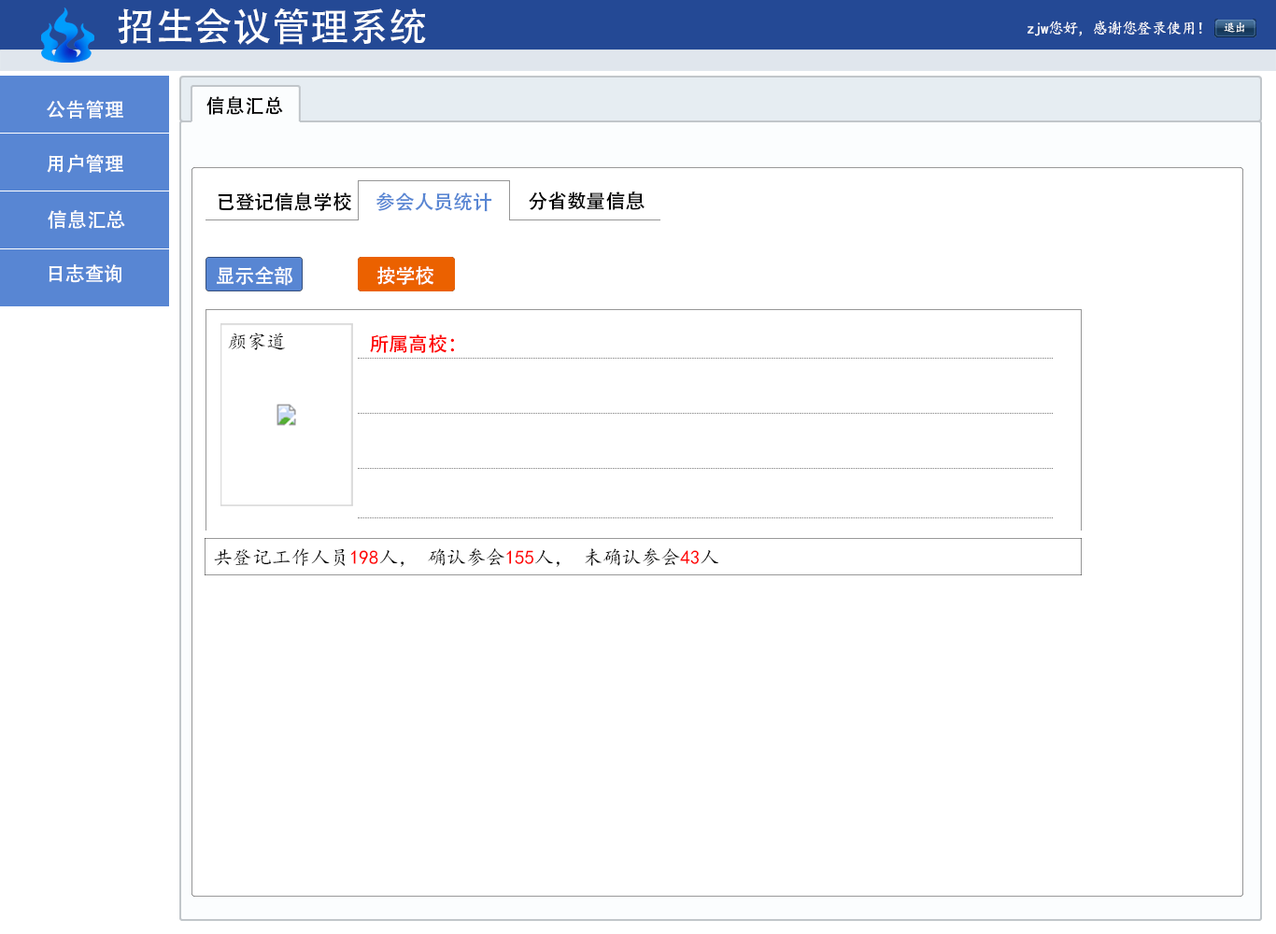
<style>
.page{position:relative;width:1276px;height:934px;background:#ffffff}
.page>*{position:absolute;margin:0}
.t1{font:38.9px "AdobeHeitiStd-Regular";color:#ffffff}
.t2{font:15.6px "KaiTi";letter-spacing:-0.05em;color:#ffffff}
.t3{font:11.7px "KaiTi";letter-spacing:-0.05em;color:#ffffff}
.t4{font:19.5px "AdobeHeitiStd-Regular";color:#fefefe}
.t5{font:19.5px "AdobeHeitiStd-Regular";color:#000000}
.t6{font:19.5px "AdobeHeitiStd-Regular";color:#5886d3}
.t7{font:19.5px "AdobeHeitiStd-Regular";color:#ffffff}
.t8{font:19.5px "KaiTi";color:#000000}
.t9{font:19.5px "AdobeHeitiStd-Regular";color:#fe0000}
.t10{font:19.5px "KaiTi";color:#ff0000}
</style>
<div class="page">
<p class="t1" style="left:118px;top:7px;width:308px;height:38px">招生会议管理系统</p>
<p class="t2" style="left:1028px;top:21px;width:174px;height:15px">zjw您好，感谢您登录使用！</p>
<p class="t3" style="left:1224px;top:22px;width:21px;height:11px">退出</p>
<p class="t4" style="left:47px;top:100px;width:76px;height:19px">公告管理</p>
<p class="t5" style="left:206px;top:96px;width:77px;height:19px">信息汇总</p>
<p class="t4" style="left:47px;top:154px;width:76px;height:19px">用户管理</p>
<p class="t5" style="left:218px;top:192px;width:133px;height:19px">已登记信息学校</p>
<p class="t6" style="left:377px;top:192px;width:115px;height:20px">参会人员统计</p>
<p class="t5" style="left:529px;top:192px;width:116px;height:18px">分省数量信息</p>
<p class="t4" style="left:48px;top:210px;width:77px;height:19px">信息汇总</p>
<p class="t4" style="left:49px;top:264px;width:72px;height:19px">日志查询</p>
<p class="t7" style="left:217px;top:266px;width:75px;height:20px">显示全部</p>
<p class="t7" style="left:377px;top:266px;width:57px;height:19px">按学校</p>
<p class="t8" style="left:228px;top:333px;width:58px;height:17px">颜家道</p>
<p class="t9" style="left:370px;top:334px;width:84px;height:19px">所属高校：</p>
<p class="t8" style="left:214px;top:548px;width:505px;height:19px">共登记工作人员<span class="t10">198</span>人， 确认参会<span class="t10">155</span>人， 未确认参会<span class="t10">43</span>人</p>
</div>
